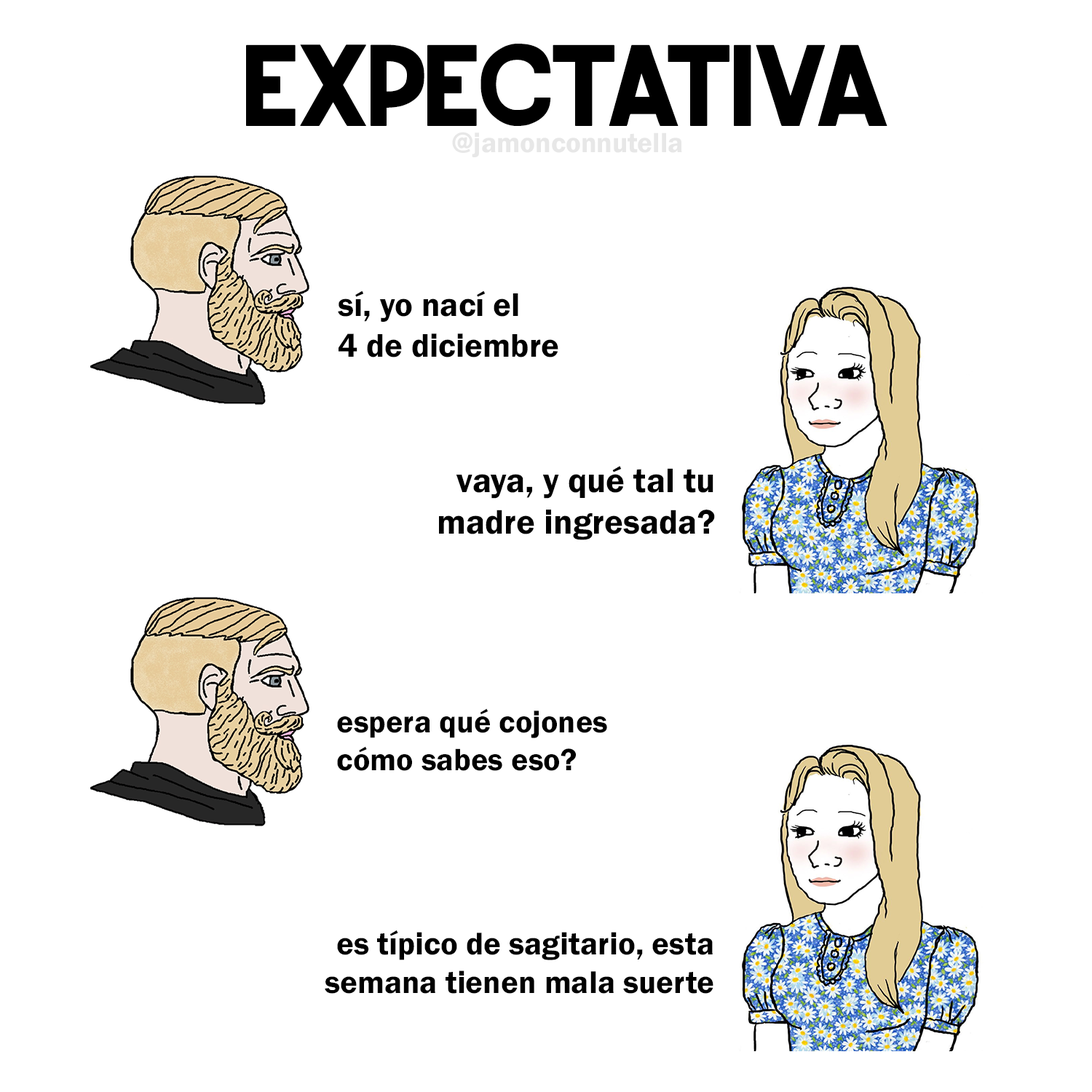
<style>
.page{position:relative;width:1092px;height:1092px;background:#ffffff}
.page>*{position:absolute;margin:0}
.t1{font:116px "RoundedSans";color:#000000}
.t2{font:28.5px "FranklinGothic-Demi";color:#e7e7e7}
.t3{font:33.9px "FranklinGothic-Demi";color:#000000}
.t4{font:35.3px "FranklinGothic-Demi";color:#000000}
.t5{font:31.9px "FranklinGothic-Demi";color:#000000}
.t6{font:32.6px "FranklinGothic-Demi";color:#000000}
</style>
<div class="page">
<p class="t1" style="left:246px;top:44px;width:641px;height:82px">EXPECTATIVA</p>
<p class="t2" style="left:452px;top:132px;width:230px;height:25px">@jamonconnutella</p>
<p class="t3" style="left:338px;top:290px;width:220px;height:67px">sí, yo nací el<br>4 de diciembre</p>
<p class="t4" style="left:439px;top:466px;width:276px;height:74px;text-align:right">vaya, y qué tal tu<br>madre ingresada?</p>
<p class="t5" style="left:337px;top:708px;width:270px;height:63px">espera qué cojones<br>cómo sabes eso?</p>
<p class="t6" style="left:325px;top:930px;width:388px;height:64px;text-align:right">es típico de sagitario, esta<br>semana tienen mala suerte</p>
</div>
